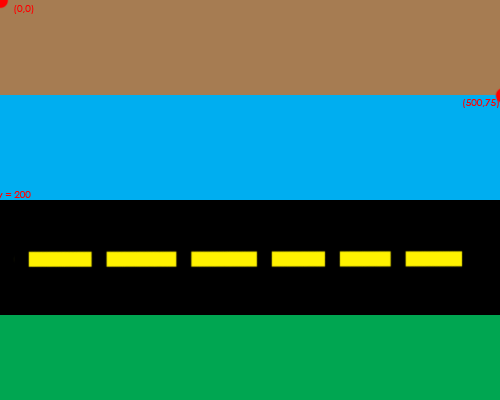
<style>
.page{position:relative;width:500px;height:400px;background:#00aef0}
.page>*{position:absolute;margin:0}
.t1{font:10px "CenturyGothic";color:#ff0000}
</style>
<div class="page">
<p class="t1" style="left:14px;top:5px;width:20px;height:9px">(0,0)</p>
<p class="t1" style="left:463px;top:99px;width:36px;height:9px">(500,75)</p>
</div>
